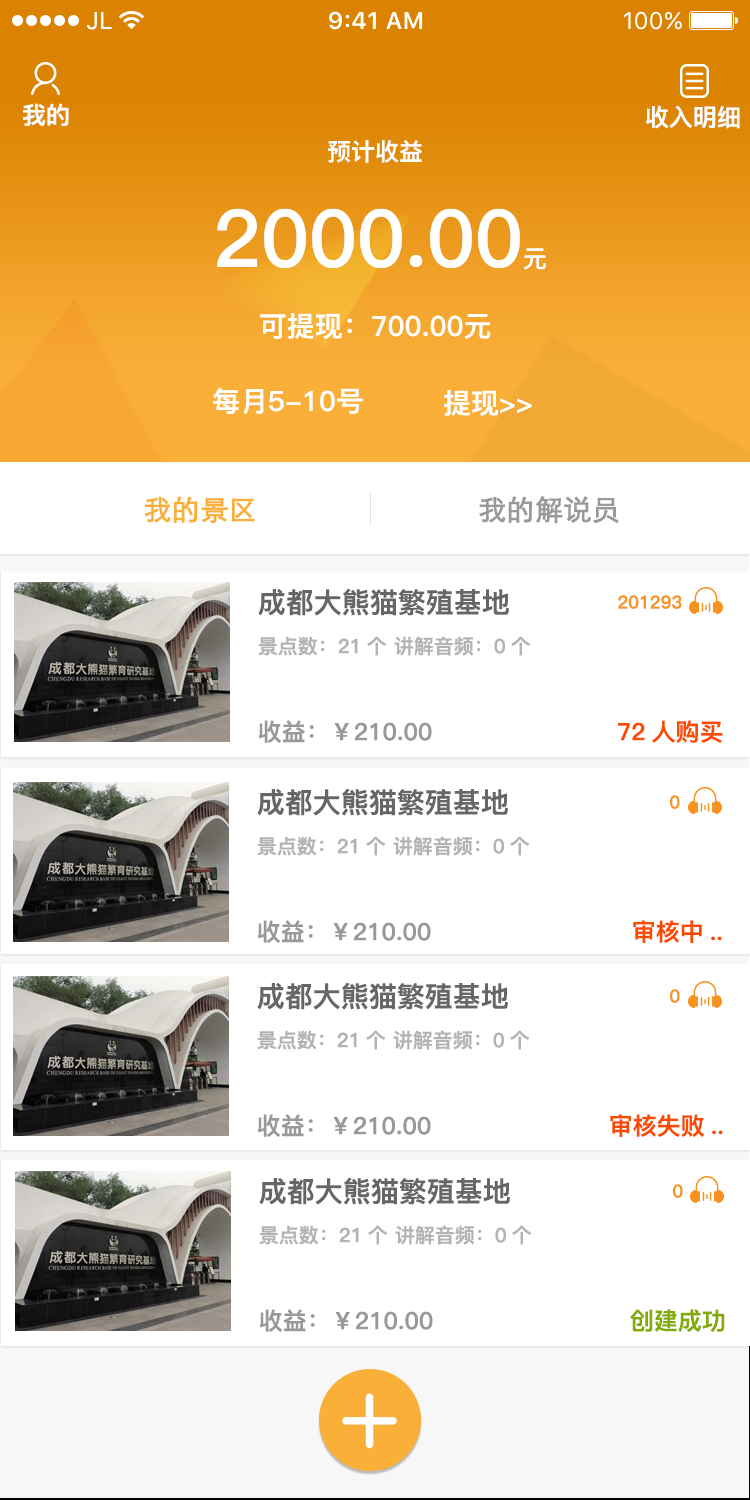
<style>
.page{position:relative;width:750px;height:1500px;background:#ffffff}
.page>*{position:absolute;margin:0}
.t1{font:24px "PingFang-SC-Heavy";color:#ffffff}
.t2{font:80px "PingFang-SC-Heavy";color:#ffffff}
.t3{font:28px "PingFang-SC-Heavy";color:#ffffff}
.t4{font:28px "STXihei";letter-spacing:-0.02em;color:#faaf39;font-weight:bold}
.t5{font:28px "STXihei";letter-spacing:-0.02em;color:#999999;font-weight:bold}
.t6{font:28px "PingFang-SC-Heavy";color:#666666}
.t7{font:18px "PingFang-SC-Heavy";color:#f79421}
.t8{font:20px "PingFang-SC-Heavy";color:#b3b3b3}
.t9{font:24px "PingFang-SC-Heavy";color:#999999}
.t10{font:24px "PingFang-SC-Heavy";color:#fa4c00}
.t11{font:24px "PingFang-SC-Heavy";color:#82ac03}
</style>
<div class="page">
<p class="t1" style="left:23px;top:103px;width:46px;height:23px">我的</p>
<p class="t1" style="left:646px;top:105px;width:94px;height:24px">收入明细</p>
<p class="t1" style="left:328px;top:140px;width:94px;height:23px">预计收益</p>
<p class="t2" style="left:217px;top:208px;width:329px;height:62px">2000.00<span class="t1">元</span></p>
<p class="t3" style="left:260px;top:313px;width:231px;height:26px">可提现：700.00元</p>
<p class="t3" style="left:213px;top:387px;width:150px;height:27px">每月5-10号</p>
<p class="t3" style="left:444px;top:390px;width:88px;height:26px">提现&gt;&gt;</p>
<p class="t4" style="left:144px;top:496px;width:111px;height:27px">我的景区</p>
<p class="t5" style="left:479px;top:496px;width:140px;height:28px">我的解说员</p>
<p class="t6" style="left:258px;top:588px;width:251px;height:28px">成都大熊猫繁殖基地</p>
<p class="t7" style="left:618px;top:595px;width:64px;height:14px">201293</p>
<p class="t8" style="left:258px;top:636px;width:129px;height:20px">景点数：21个</p>
<p class="t8" style="left:394px;top:636px;width:137px;height:20px">讲解音频：0个</p>
<p class="t9" style="left:258px;top:720px;width:174px;height:23px">收益：￥210.00</p>
<p class="t10" style="left:618px;top:720px;width:105px;height:23px">72人购买</p>
<p class="t6" style="left:257px;top:788px;width:251px;height:28px">成都大熊猫繁殖基地</p>
<p class="t7" style="left:670px;top:795px;width:10px;height:14px">0</p>
<p class="t8" style="left:257px;top:836px;width:129px;height:20px">景点数：21个</p>
<p class="t8" style="left:393px;top:836px;width:137px;height:20px">讲解音频：0个</p>
<p class="t9" style="left:257px;top:920px;width:174px;height:23px">收益：￥210.00</p>
<p class="t10" style="left:633px;top:920px;width:89px;height:23px">审核中..</p>
<p class="t6" style="left:257px;top:982px;width:251px;height:28px">成都大熊猫繁殖基地</p>
<p class="t7" style="left:670px;top:989px;width:10px;height:14px">0</p>
<p class="t8" style="left:257px;top:1030px;width:129px;height:20px">景点数：21个</p>
<p class="t8" style="left:393px;top:1030px;width:137px;height:20px">讲解音频：0个</p>
<p class="t9" style="left:257px;top:1114px;width:174px;height:23px">收益：￥210.00</p>
<p class="t10" style="left:610px;top:1114px;width:113px;height:23px">审核失败..</p>
<p class="t6" style="left:259px;top:1177px;width:251px;height:28px">成都大熊猫繁殖基地</p>
<p class="t7" style="left:673px;top:1184px;width:10px;height:14px">0</p>
<p class="t8" style="left:259px;top:1225px;width:129px;height:20px">景点数：21个</p>
<p class="t8" style="left:395px;top:1225px;width:137px;height:20px">讲解音频：0个</p>
<p class="t9" style="left:259px;top:1309px;width:174px;height:23px">收益：￥210.00</p>
<p class="t11" style="left:630px;top:1309px;width:95px;height:23px">创建成功</p>
</div>
